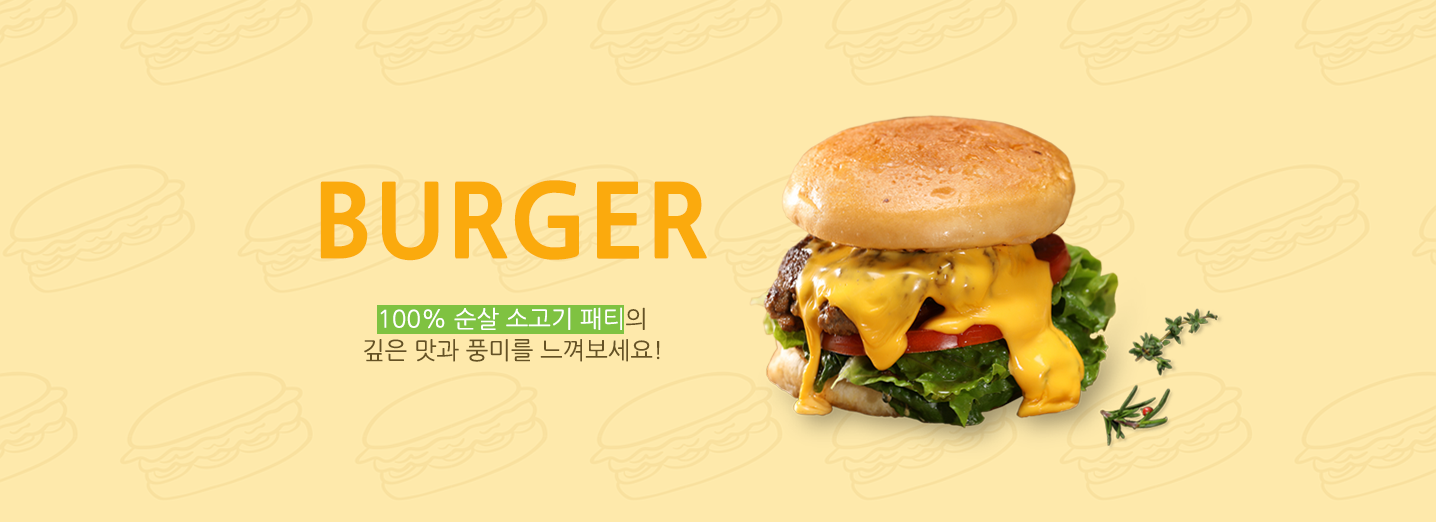
<style>
.page{position:relative;width:1436px;height:522px;background:#fee9ab}
.page>*{position:absolute;margin:0}
.t1{font:100px "NanumGothicExtraBold";color:#fbaa0d}
.t2{font:24px/31.4px "NanumGothic";color:#655224}
.t3{font:24px/31.4px "NanumGothic";color:#ffffff}
</style>
<div class="page">
<p class="t1" style="left:320px;top:180px;width:387px;height:81px">BURGER</p>
<p class="t2" style="left:364px;top:307px;width:296px;height:55px;text-align:center"><span class="t3">100% 순살 소고기 패티</span>의<br>깊은 맛과 풍미를 느껴보세요!</p>
</div>
